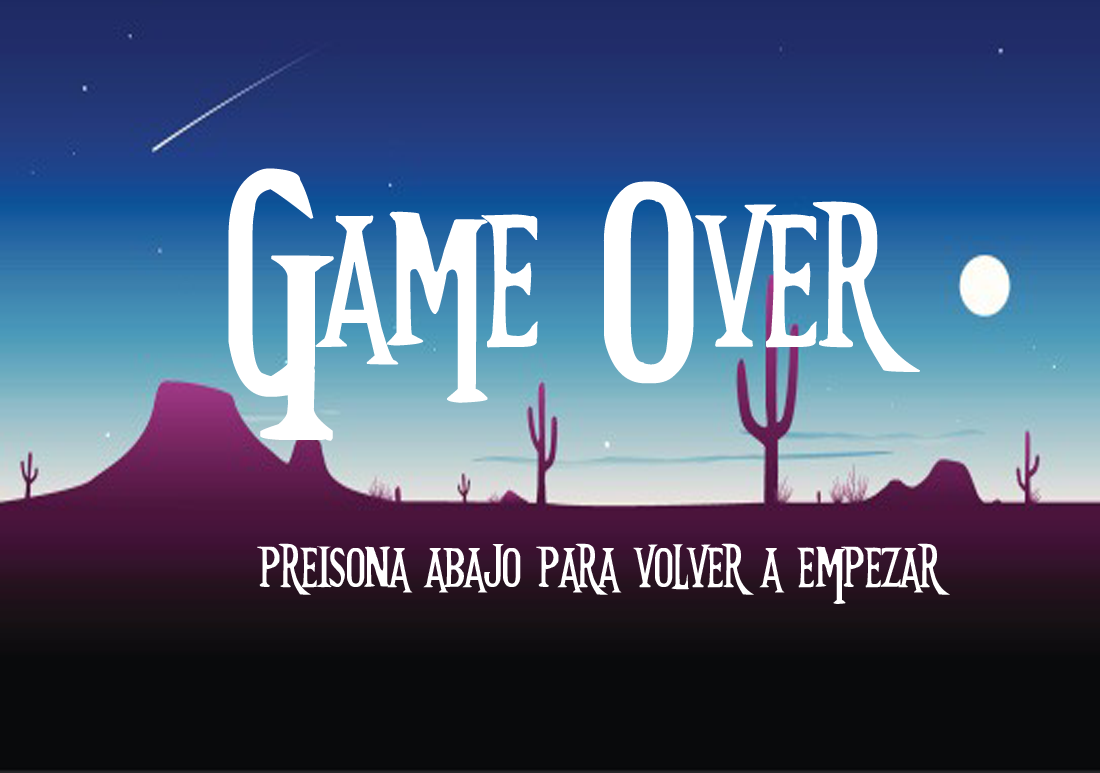
<style>
.page{position:relative;width:1100px;height:773px}
.page>*{position:absolute;margin:0}
.t1{font:240px "FutureTimeSplitters";color:#ffffff}
.t2{font:72px "FutureTimeSplitters";color:#ffffff}
</style>
<div class="page">
<p class="t1" style="left:228px;top:168px;width:692px;height:273px">Game Over</p>
<p class="t2" style="left:257px;top:543px;width:693px;height:61px">preisona abajo para volver a empezar</p>
</div>
